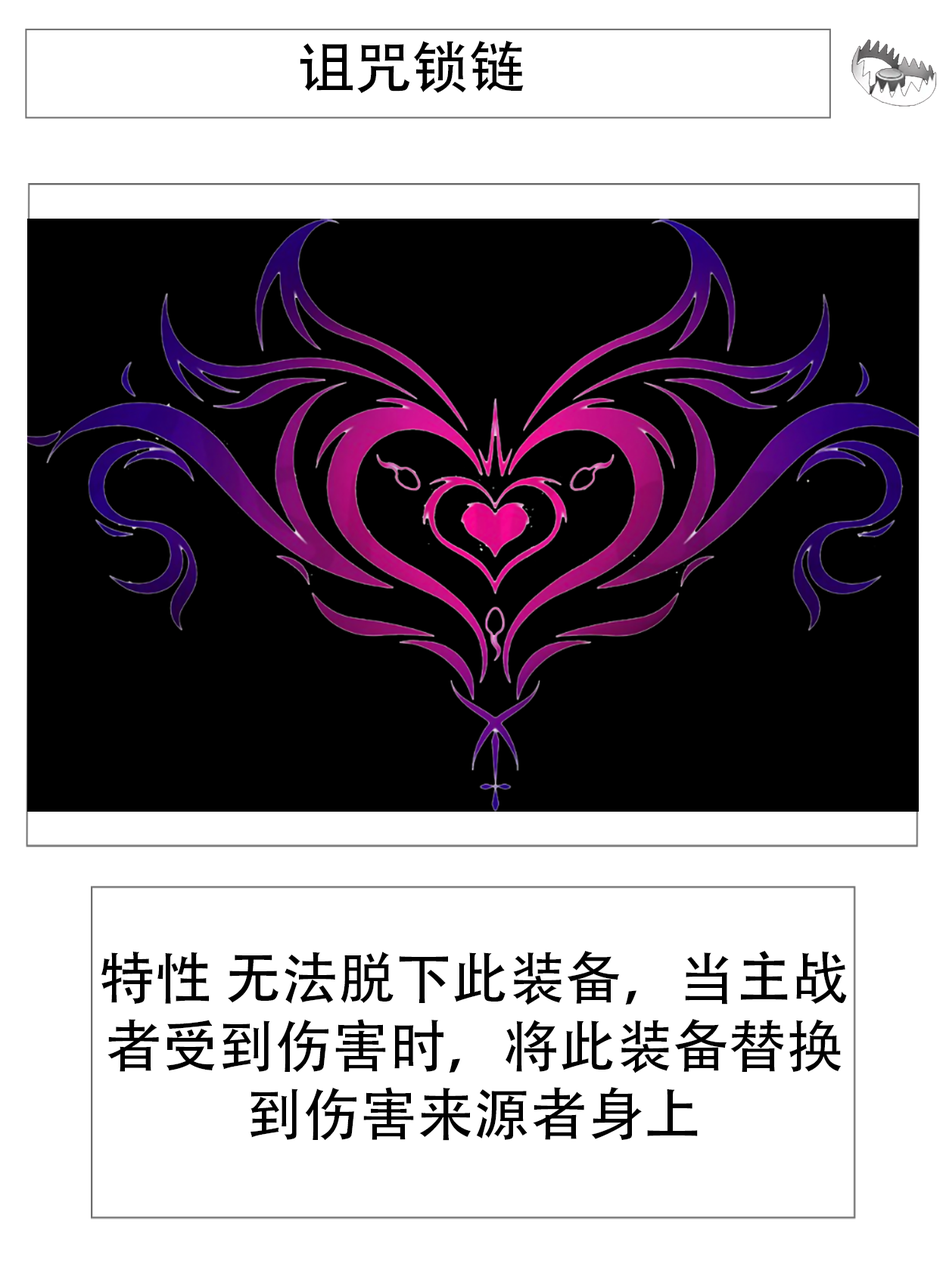
<style>
.page{position:relative;width:946px;height:1261px;background:#ffffff}
.page>*{position:absolute;margin:0}
.t1{font:56.7px "AdobeHeitiStd-Regular";color:#000000}
</style>
<div class="page">
<p class="t1" style="left:300px;top:40px;width:223px;height:53px">诅咒锁链</p>
<p class="t1" style="left:101px;top:951px;width:745px;height:190px;text-align:center">特性 无法脱下此装备，当主战者受到伤害时，将此装备替换到伤害来源者身上</p>
</div>
